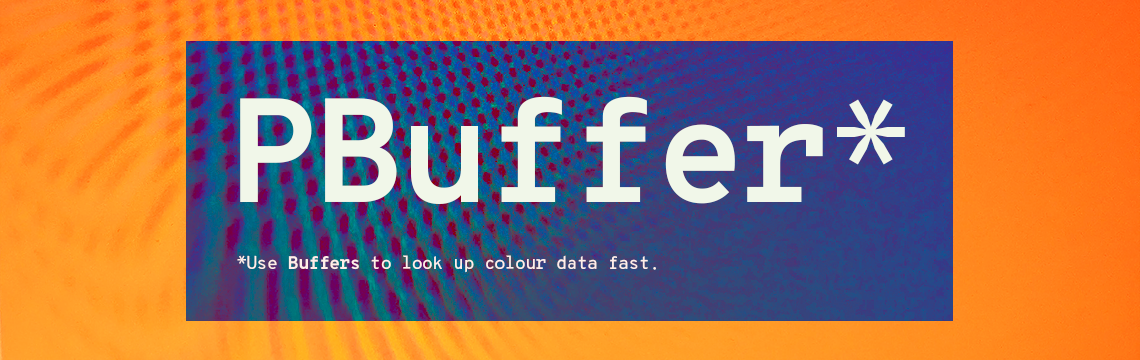
<style>
.page{position:relative;width:1140px;height:360px}
.page>*{position:absolute;margin:0}
.t1{font:147.9px "OverpassMono-Bold";letter-spacing:-0.04em;color:#f1f7e9}
.t2{font:147.9px "OverpassMono-Light";letter-spacing:-0.04em;color:#f1f7e9}
.t3{font:17.9px "OverpassMono-Regular";letter-spacing:-0.04em;color:#ffeee9}
.t4{font:17.9px "OverpassMono-Light";letter-spacing:-0.04em;color:#ffeee9}
.t5{font:17.9px "OverpassMono-Bold";letter-spacing:-0.04em;color:#ffeee9}
</style>
<div class="page">
<p class="t1" style="left:240px;top:96px;width:665px;height:108px">PBuffer<span class="t2">*</span></p>
<p class="t3" style="left:237px;top:255px;width:419px;height:18px"><span class="t4">*</span>Use <span class="t5">Buffers</span> to look up colour data fast.</p>
</div>
